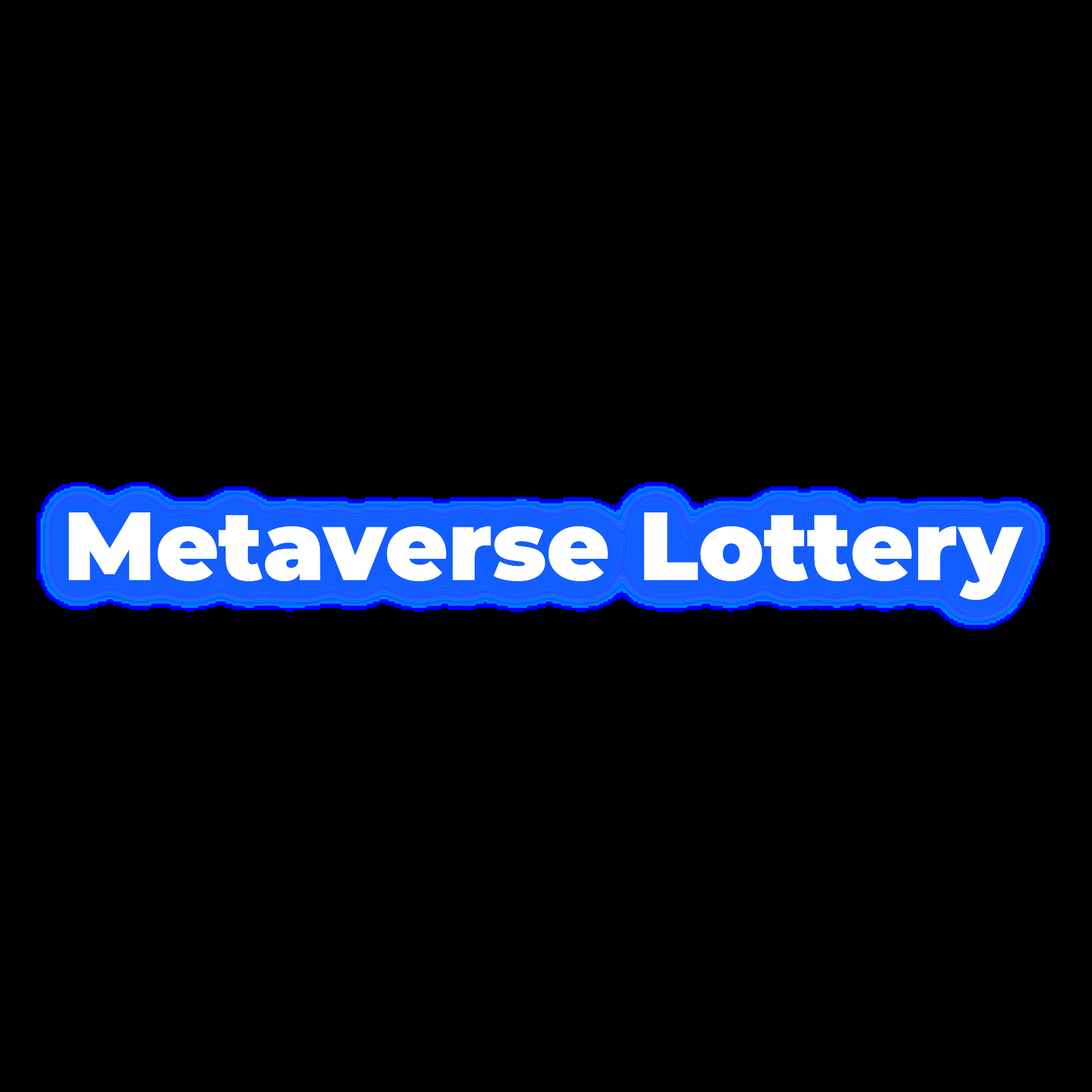
<style>
.page{position:relative;width:1092px;height:1092px;background:#000000}
.page>*{position:absolute;margin:0}
.t1{font:96.7px "Montserrat-Black";color:#ffffff}
</style>
<div class="page">
<p class="t1" style="left:0px;top:0px;width:1092px;height:1092px;text-align:center">Metaverse Lottery</p>
</div>
